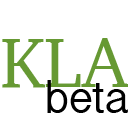
<style>
.page{position:relative;width:128px;height:128px;background:#ffffff}
.page>*{position:absolute;margin:0}
.t1{font:72px "Charter-Roman";color:#669933}
.t2{font:48px "InaiMathi";color:#000000}
</style>
<div class="page">
<p class="t1" style="left:2px;top:38px;width:127px;height:50px">KLA</p>
<p class="t2" style="left:47px;top:80px;width:81px;height:33px">beta</p>
</div>
